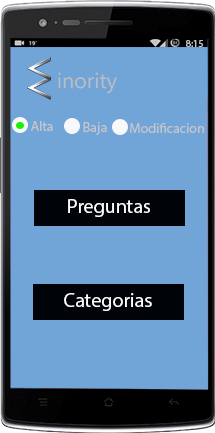
<style>
.page{position:relative;width:215px;height:433px;background:#71a4d7}
.page>*{position:absolute;margin:0}
.t1{font:10px "MyriadPro-Regular";color:#c4c5cb}
.t2{font:14px "MyriadPro-Regular";color:#c4c5cb}
.t3{font:20px "MyriadPro-Regular";color:#ffffff}
</style>
<div class="page">
<p class="t1" style="left:186px;top:40px;width:17px;height:7px">8:15</p>
<p class="t2" style="left:31px;top:121px;width:22px;height:10px">Alta</p>
<p class="t2" style="left:83px;top:122px;width:24px;height:13px">Baja</p>
<p class="t2" style="left:130px;top:123px;width:74px;height:10px">Modificacion</p>
<p class="t3" style="left:68px;top:199px;width:82px;height:18px">Preguntas</p>
<p class="t3" style="left:64px;top:293px;width:88px;height:18px">Categorias</p>
</div>
